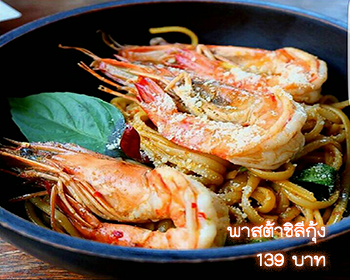
<style>
.page{position:relative;width:350px;height:280px}
.page>*{position:absolute;margin:0}
.t1{font:24px "THKodchasal";color:#ffffff}
</style>
<div class="page">
<p class="t1" style="left:227px;top:220px;width:99px;height:47px">พาสต้าชิลีกุ้ง<br>บาท 139</p>
</div>
